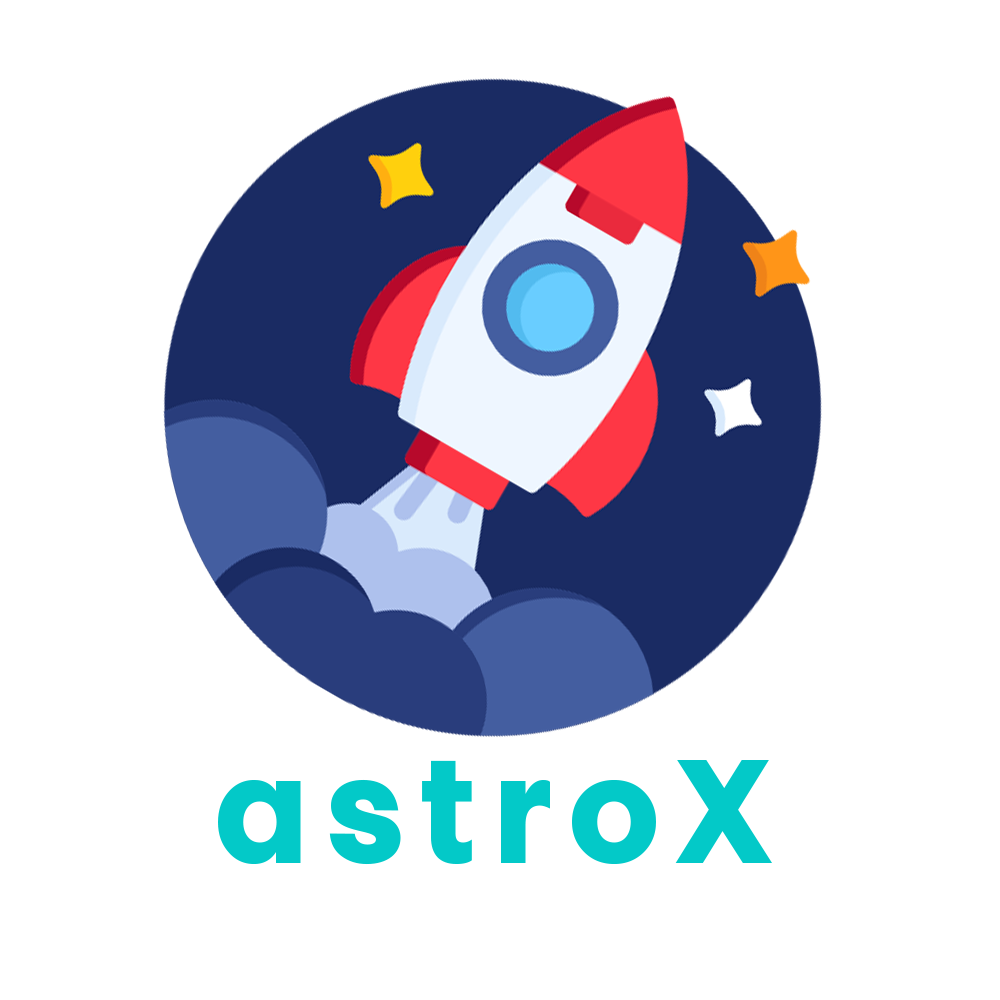
<style>
.page{position:relative;width:1000px;height:1000px;background:#ffffff}
.page>*{position:absolute;margin:0}
.t1{font:147px "Touche-Bold";letter-spacing:0.1em;color:#03c9c8}
</style>
<div class="page">
<p class="t1" style="left:218px;top:760px;width:554px;height:105px">astroX</p>
</div>
